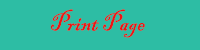
<style>
.page{position:relative;width:200px;height:50px;background:#2dbda4}
.page>*{position:absolute;margin:0}
.t1{font:25px "BlackadderITC-Regular";color:#ef1313}
</style>
<div class="page">
<p class="t1" style="left:51px;top:9px;width:94px;height:29px">Print Page</p>
</div>
